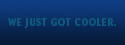
<style>
.page{position:relative;width:125px;height:45px}
.page>*{position:absolute;margin:0}
.t1{font:10px "Barmeno-Bold";letter-spacing:0.08em;color:#0e5a7e;text-transform:uppercase}
</style>
<div class="page">
<p class="t1" style="left:8px;top:18px;width:108px;height:10px">we just got cooler.</p>
</div>
